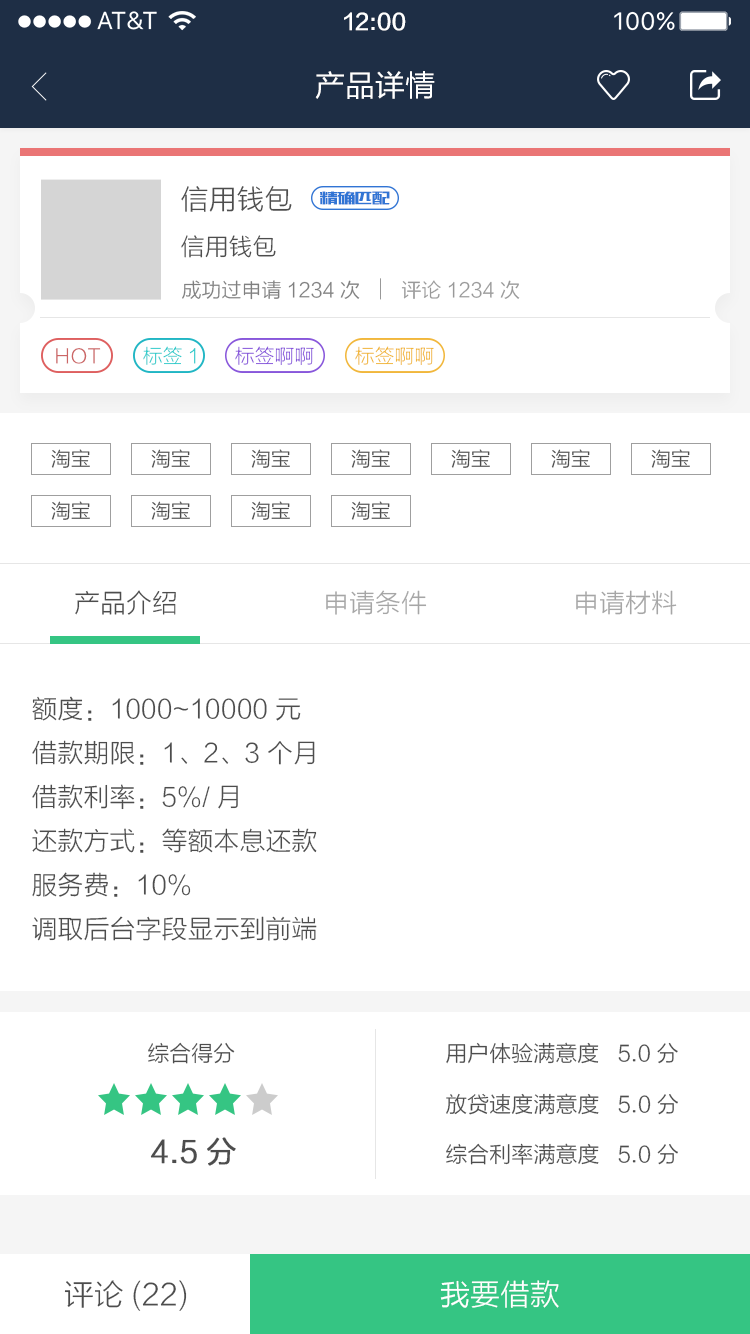
<style>
.page{position:relative;width:750px;height:1334px;background:#ffffff}
.page>*{position:absolute;margin:0}
.t1{font:22px "FZLTZHK--GBK1-0";color:#ffffff}
.t2{font:30px "FZLTHJW--GB1-0";color:#ffffff}
.t3{font:28px "FZLTXHK";color:#4d4d4d}
.t4{font:17.5px "MFBanHei_Noncommercial-Regular";color:#3174d4}
.t5{font:24px "FZLTXHK";color:#4d4d4d}
.t6{font:20px "FZLTXHK";color:#808080}
.t7{font:20px "FZLTXHK";color:#999999}
.t8{font:20px "FZLTXHK";color:#cc6666}
.t9{font:20px "FZLTXHK";color:#33cccc}
.t10{font:20px "FZLTXHK";color:#8857db}
.t11{font:20px "FZLTXHK";color:#f1b73c}
.t12{font:20px "FZLTXHK";color:#4d4d4d}
.t13{font:26px "FZLTXHK";color:#4d4d4d}
.t14{font:26px "FZLTXHK";color:#a6a6a6}
.t15{font:26px/44px "FZLTXHK";color:#4d4d4d}
.t16{font:22px "FZLTXHK";color:#4d4d4d}
.t17{font:22.1px "FZLTXHK";color:#4d4d4d}
.t18{font:30px "FZLTXHK";color:#4d4d4d;font-weight:bold}
.t19{font:30px "FZLTXHK";color:#4d4d4d}
.t20{font:30px "FZLTXHK";color:#ffffff}
</style>
<div class="page">
<p class="t1" style="left:344px;top:12px;width:62px;height:19px">12:00</p>
<p class="t2" style="left:315px;top:71px;width:120px;height:28px">产品详情</p>
<p class="t3" style="left:181px;top:186px;width:111px;height:26px">信用钱包</p>
<p class="t4" style="left:320px;top:191px;width:70px;height:14px">精确匹配</p>
<p class="t5" style="left:181px;top:235px;width:95px;height:23px">信用钱包</p>
<p class="t6" style="left:182px;top:280px;width:178px;height:20px">成功过申请1234次</p>
<p class="t7" style="left:401px;top:280px;width:119px;height:19px">评论1234次</p>
<p class="t8" style="left:56px;top:348px;width:45px;height:16px">HOT</p>
<p class="t9" style="left:143px;top:346px;width:53px;height:19px">标签1</p>
<p class="t10" style="left:235px;top:346px;width:79px;height:19px">标签啊啊</p>
<p class="t11" style="left:355px;top:346px;width:79px;height:19px">标签啊啊</p>
<p class="t12" style="left:51px;top:449px;width:39px;height:19px">淘宝</p>
<p class="t12" style="left:151px;top:449px;width:39px;height:19px">淘宝</p>
<p class="t12" style="left:251px;top:449px;width:39px;height:19px">淘宝</p>
<p class="t12" style="left:351px;top:449px;width:39px;height:19px">淘宝</p>
<p class="t12" style="left:451px;top:449px;width:39px;height:19px">淘宝</p>
<p class="t12" style="left:551px;top:449px;width:39px;height:19px">淘宝</p>
<p class="t12" style="left:651px;top:449px;width:39px;height:19px">淘宝</p>
<p class="t12" style="left:51px;top:501px;width:39px;height:19px">淘宝</p>
<p class="t12" style="left:151px;top:501px;width:39px;height:19px">淘宝</p>
<p class="t12" style="left:251px;top:501px;width:39px;height:19px">淘宝</p>
<p class="t12" style="left:351px;top:501px;width:39px;height:19px">淘宝</p>
<p class="t13" style="left:75px;top:590px;width:101px;height:25px">产品介绍</p>
<p class="t14" style="left:326px;top:590px;width:101px;height:25px">申请条件</p>
<p class="t14" style="left:576px;top:590px;width:101px;height:25px">申请材料</p>
<p class="t15" style="left:32px;top:696px;width:285px;height:245px">额度：1000~10000元<br>借款期限：1、2、3个月<br>借款利率：5%/月<br>还款方式：等额本息还款<br>服务费：10%<br>调取后台字段显示到前端</p>
<p class="t16" style="left:148px;top:1042px;width:87px;height:22px">综合得分</p>
<p class="t16" style="left:446px;top:1042px;width:232px;height:22px">用户体验满意度   5.0分</p>
<p class="t17" style="left:446px;top:1093px;width:232px;height:22px">放贷速度满意度   5.0分</p>
<p class="t18" style="left:150px;top:1137px;width:86px;height:29px">4.5分</p>
<p class="t17" style="left:446px;top:1143px;width:232px;height:22px">综合利率满意度   5.0分</p>
<p class="t19" style="left:64px;top:1280px;width:123px;height:31px">评论(22)</p>
<p class="t20" style="left:440px;top:1280px;width:119px;height:28px">我要借款</p>
</div>
